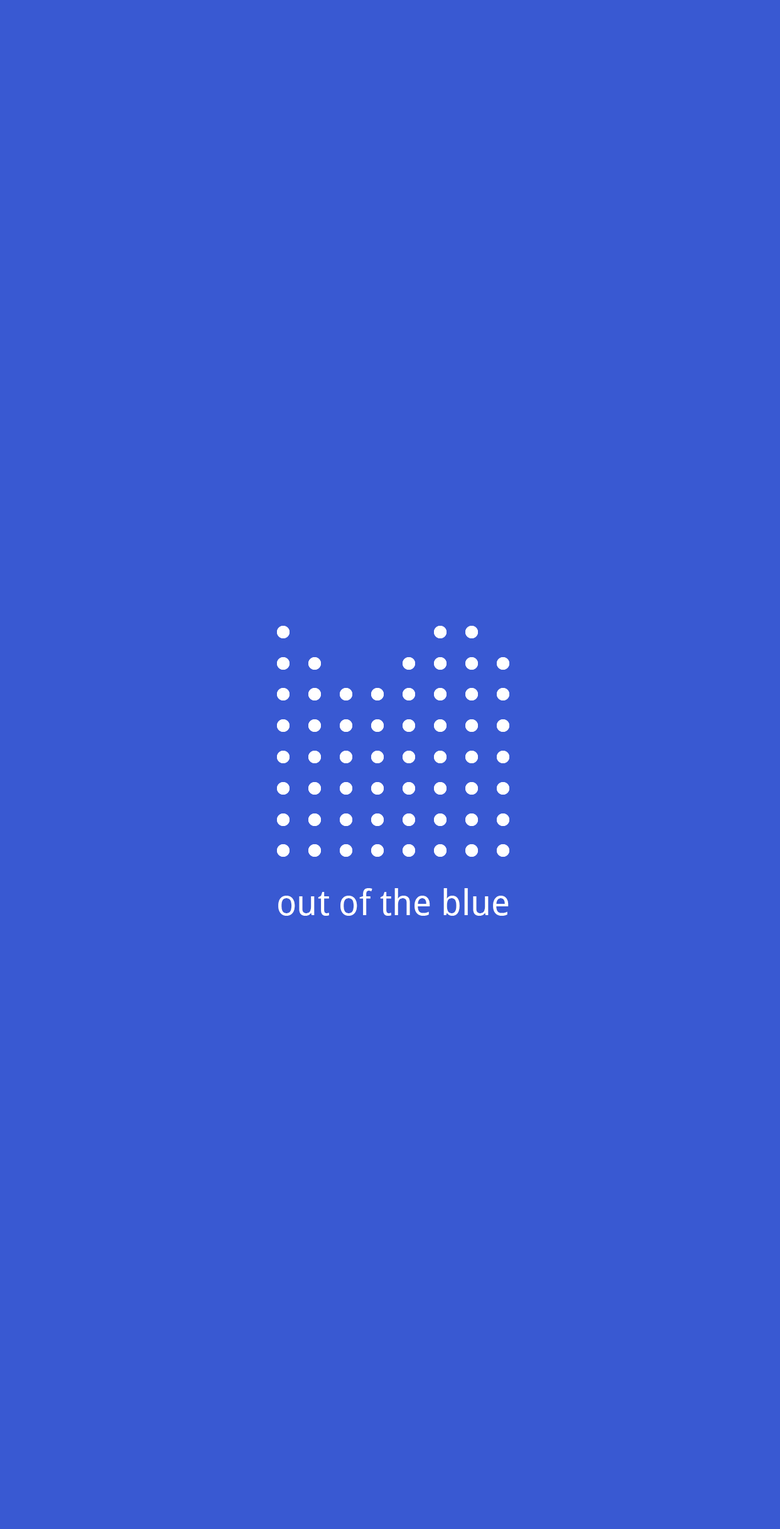
<style>
.page{position:relative;width:780px;height:1529px;background:#3959d2}
.page>*{position:absolute;margin:0}
.t1{font:35.3px "DroidSans";color:#ffffff}
</style>
<div class="page">
<p class="t1" style="left:278px;top:888px;width:231px;height:28px">out of the blue</p>
</div>
